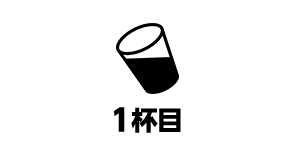
<style>
.page{position:relative;width:295px;height:150px;background:#ffffff}
.page>*{position:absolute;margin:0}
.t1{font:26px "UDShinGoPro-Bold";color:#000000}
.t2{font:30px "UDShinGoPro-Bold";color:#000000}
</style>
<div class="page">
<p class="t1" style="left:114px;top:107px;width:67px;height:26px"><span class="t2">1</span>杯目</p>
</div>
